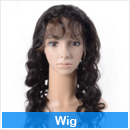
<style>
.page{position:relative;width:130px;height:130px;background:#ffffff}
.page>*{position:absolute;margin:0}
.t1{font:12px "ArialRoundedMTBold";color:#ffffff}
</style>
<div class="page">
<p class="t1" style="left:55px;top:116px;width:22px;height:11px">Wig</p>
</div>
